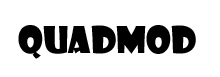
<style>
.page{position:relative;width:220px;height:77px;background:#ffffff}
.page>*{position:absolute;margin:0}
.t1{font:36px "ShowcardGothic-Reg";color:#000000}
</style>
<div class="page">
<p class="t1" style="left:18px;top:25px;width:178px;height:34px">QUADMOD</p>
</div>
